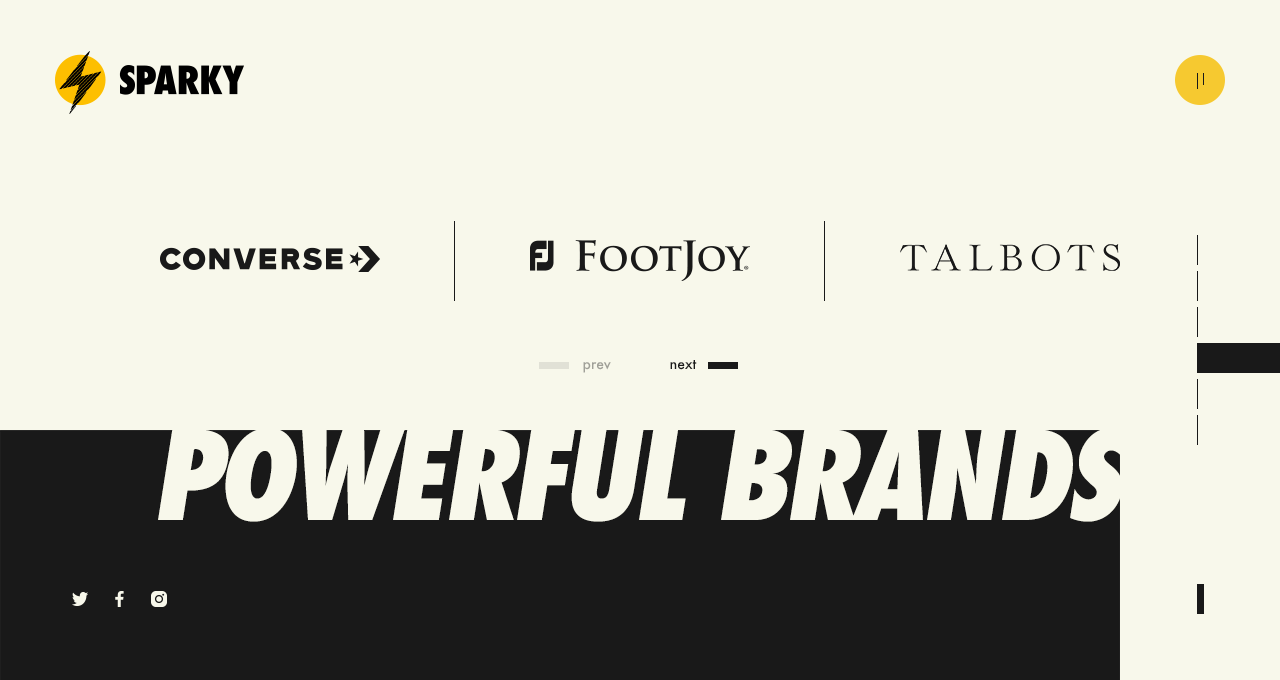
<style>
.page{position:relative;width:1280px;height:680px;background:#f8f8eb}
.page>*{position:absolute;margin:0}
.t1{font:14px "Futura-Medium";color:#a0a098}
.t2{font:14px "Futura-Medium";color:#191919}
.t3{font:120px "Futura-CondExtraBoldObl";letter-spacing:-0.03em;color:#f8f8eb;text-transform:uppercase}
</style>
<div class="page">
<p class="t1" style="left:583px;top:362px;width:28px;height:11px">prev</p>
<p class="t2" style="left:670px;top:360px;width:27px;height:10px">next</p>
<p class="t3" style="left:158px;top:428px;width:971px;height:94px">powerful brands</p>
</div>
